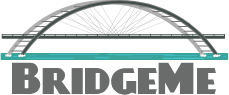
<style>
.page{position:relative;width:229px;height:95px;background:#ffffff}
.page>*{position:absolute;margin:0}
.t1{font:39px "DayPosterBlack";color:#696c6b}
</style>
<div class="page">
<p class="t1" style="left:11px;top:62px;width:205px;height:33px">BridgeMe</p>
</div>
